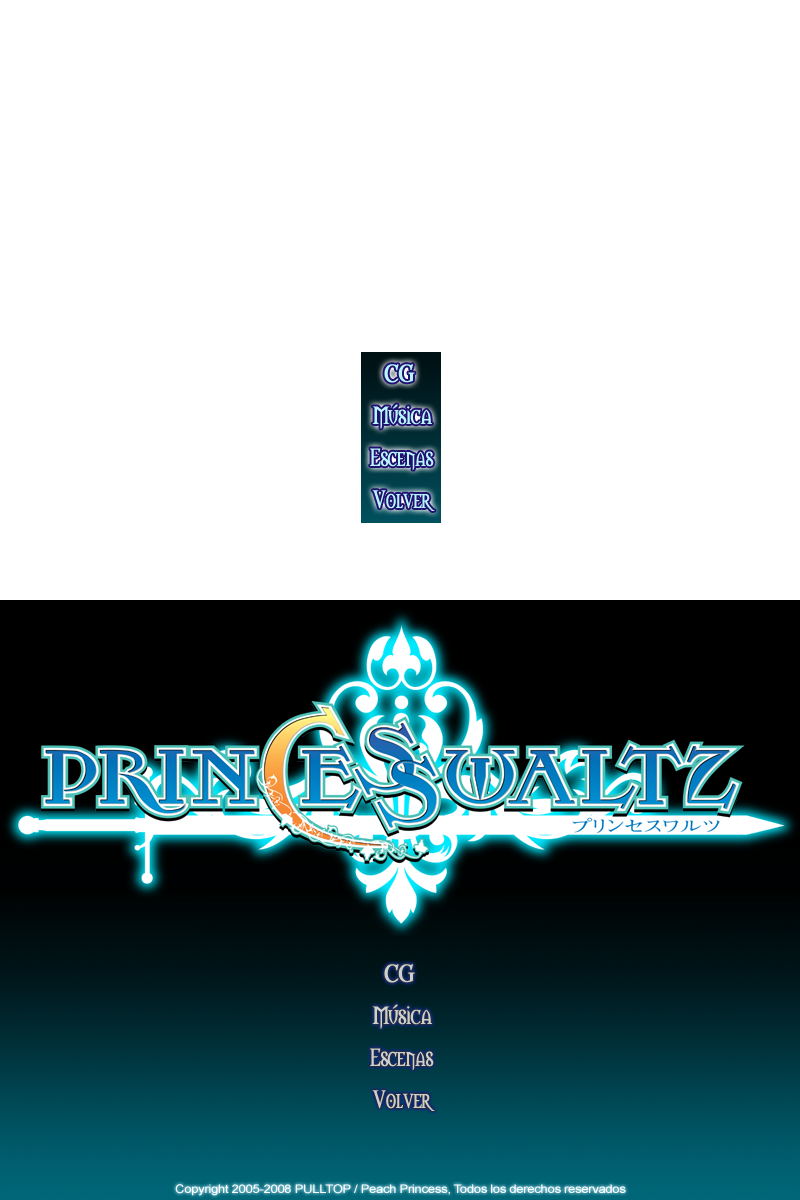
<style>
.page{position:relative;width:800px;height:1200px;background:#ffffff}
.page>*{position:absolute;margin:0}
.t1{font:23px "Morpheus";letter-spacing:-0.03em;color:#b8f6ff;font-weight:bold}
.t2{font:23px "Morpheus";letter-spacing:-0.03em;color:#b8f6ff;font-weight:bold;scale:0.87 1}
.t3{font:23px "Morpheus";letter-spacing:-0.03em;color:#b8f6ff;font-weight:bold;scale:0.8 1}
.t4{font:23px "Morpheus";letter-spacing:-0.03em;color:#ccd0d1;font-weight:bold}
.t5{font:23px "Morpheus";letter-spacing:-0.03em;color:#ccd0d1;font-weight:bold;scale:0.87 1}
.t6{font:23px "Morpheus";letter-spacing:-0.03em;color:#ccd0d1;font-weight:bold;scale:0.8 1}
.t7{font:11.8px "ArialMT";letter-spacing:-0.03em;color:#ffffff;scale:1.12 1}
</style>
<div class="page">
<p class="t1" style="left:384px;top:364px;width:31px;height:19px">CG</p>
<p class="t2" style="left:372px;top:404px;width:60px;height:25px">Música</p>
<p class="t3" style="left:370px;top:448px;width:64px;height:22px">Escenas</p>
<p class="t3" style="left:372px;top:490px;width:63px;height:21px">Volver</p>
<p class="t4" style="left:384px;top:964px;width:31px;height:19px">CG</p>
<p class="t5" style="left:372px;top:1004px;width:60px;height:25px">Música</p>
<p class="t6" style="left:370px;top:1048px;width:64px;height:22px">Escenas</p>
<p class="t6" style="left:372px;top:1090px;width:63px;height:21px">Volver</p>
<p class="t7" style="left:175px;top:1184px;width:451px;height:12px">Copyright 2005-2008 PULLTOP / Peach Princess, Todos los derechos reservados</p>
</div>
